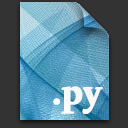
<style>
.page{position:relative;width:128px;height:128px;background:#333333}
.page>*{position:absolute;margin:0}
.t1{font:36px "Dolly-Bold";color:#ffffff}
</style>
<div class="page">
<p class="t1" style="left:53px;top:86px;width:50px;height:28px">.py</p>
</div>
